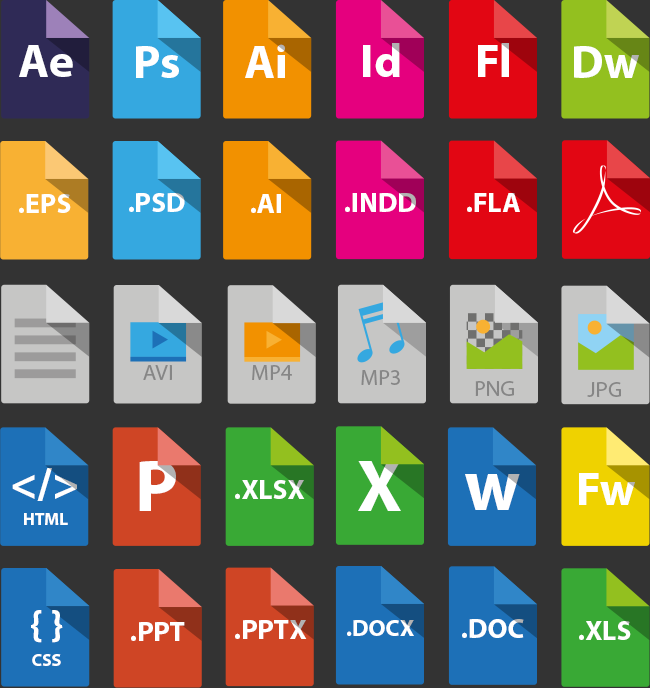
<style>
.page{position:relative;width:650px;height:688px;background:#333333}
.page>*{position:absolute;margin:0}
.t1{font:47.2px "MyriadPro-Bold";color:#ffffff}
.t2{font:27.9px "MyriadPro-Bold";color:#ffffff}
.t3{font:22.3px "MyriadPro-Regular";color:#868686}
.t4{font:73.9px "MyriadPro-Bold";color:#ffffff}
.t5{font:45.7px "MyriadPro-Bold";color:#ffffff}
.t6{font:17.8px "MyriadPro-Bold";color:#ffffff}
.t7{font:40.1px "MyriadPro-Bold";color:#ffffff}
.t8{font:23.8px "MyriadPro-Bold";color:#ffffff}
</style>
<div class="page">
<p class="t1" style="left:19px;top:45px;width:54px;height:32px">Ae</p>
<p class="t1" style="left:136px;top:46px;width:43px;height:32px">Ps</p>
<p class="t1" style="left:245px;top:44px;width:40px;height:34px">Ai</p>
<p class="t1" style="left:363px;top:43px;width:37px;height:34px">Id</p>
<p class="t1" style="left:478px;top:43px;width:31px;height:34px">Fl</p>
<p class="t1" style="left:574px;top:46px;width:65px;height:32px">Dw</p>
<p class="t2" style="left:19px;top:194px;width:52px;height:19px">.EPS</p>
<p class="t2" style="left:129px;top:193px;width:56px;height:19px">.PSD</p>
<p class="t2" style="left:251px;top:194px;width:30px;height:19px">.AI</p>
<p class="t2" style="left:345px;top:193px;width:71px;height:19px">.INDD</p>
<p class="t2" style="left:467px;top:193px;width:53px;height:19px">.FLA</p>
<p class="t3" style="left:143px;top:365px;width:29px;height:15px">AVI</p>
<p class="t3" style="left:252px;top:365px;width:40px;height:15px">MP4</p>
<p class="t3" style="left:361px;top:370px;width:39px;height:15px">MP3</p>
<p class="t3" style="left:475px;top:381px;width:39px;height:15px">PNG</p>
<p class="t3" style="left:587px;top:382px;width:34px;height:15px">JPG</p>
<p class="t4" style="left:139px;top:461px;width:37px;height:50px">P</p>
<p class="t4" style="left:358px;top:461px;width:43px;height:50px">X</p>
<p class="t5" style="left:12px;top:468px;width:65px;height:33px">&lt;/&gt;</p>
<p class="t1" style="left:579px;top:473px;width:56px;height:32px">Fw</p>
<p class="t2" style="left:235px;top:480px;width:70px;height:19px">.XLSX</p>
<p class="t4" style="left:465px;top:474px;width:55px;height:36px">w</p>
<p class="t6" style="left:24px;top:513px;width:44px;height:12px">HTML</p>
<p class="t7" style="left:31px;top:610px;width:32px;height:33px">{ }</p>
<p class="t2" style="left:131px;top:622px;width:54px;height:19px">.PPT</p>
<p class="t2" style="left:235px;top:620px;width:72px;height:19px">.PPTX</p>
<p class="t8" style="left:347px;top:620px;width:67px;height:16px">.DOCX</p>
<p class="t2" style="left:462px;top:619px;width:62px;height:19px">.DOC</p>
<p class="t2" style="left:579px;top:621px;width:52px;height:19px">.XLS</p>
<p class="t6" style="left:32px;top:654px;width:29px;height:12px">CSS</p>
</div>
